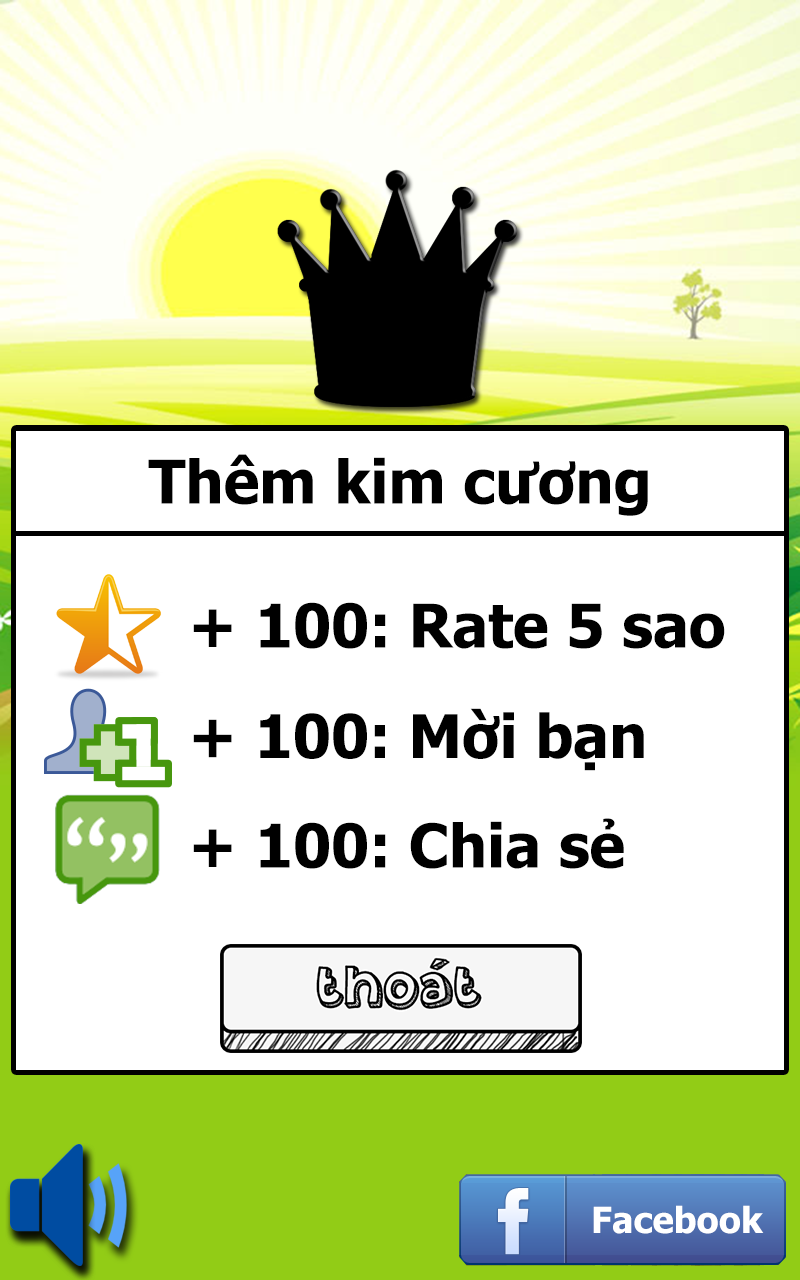
<style>
.page{position:relative;width:800px;height:1280px;background:#ffffff}
.page>*{position:absolute;margin:0}
.t1{font:60px "Tahoma-Bold";color:#000000}
.t2{font:60.2px "Tahoma-Bold";color:#000000}
</style>
<div class="page">
<p class="t1" style="left:148px;top:454px;width:500px;height:62px">Thêm kim cương</p>
<p class="t1" style="left:193px;top:602px;width:532px;height:47px">+ 100: Rate 5 sao</p>
<p class="t2" style="left:193px;top:708px;width:451px;height:63px">+ 100: Mời bạn</p>
<p class="t1" style="left:193px;top:818px;width:431px;height:51px">+ 100: Chia sẻ</p>
</div>
